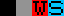
<style>
.page{position:relative;width:64px;height:16px;background:#000000}
.page>*{position:absolute;margin:0}
.t1{font:22.9px "Courier";color:#000000;scale:1.3 1}
</style>
<div class="page">
<p class="t1" style="left:33px;top:1px;width:14px;height:14px">W</p>
<p class="t1" style="left:49px;top:1px;width:14px;height:14px">S</p>
</div>
